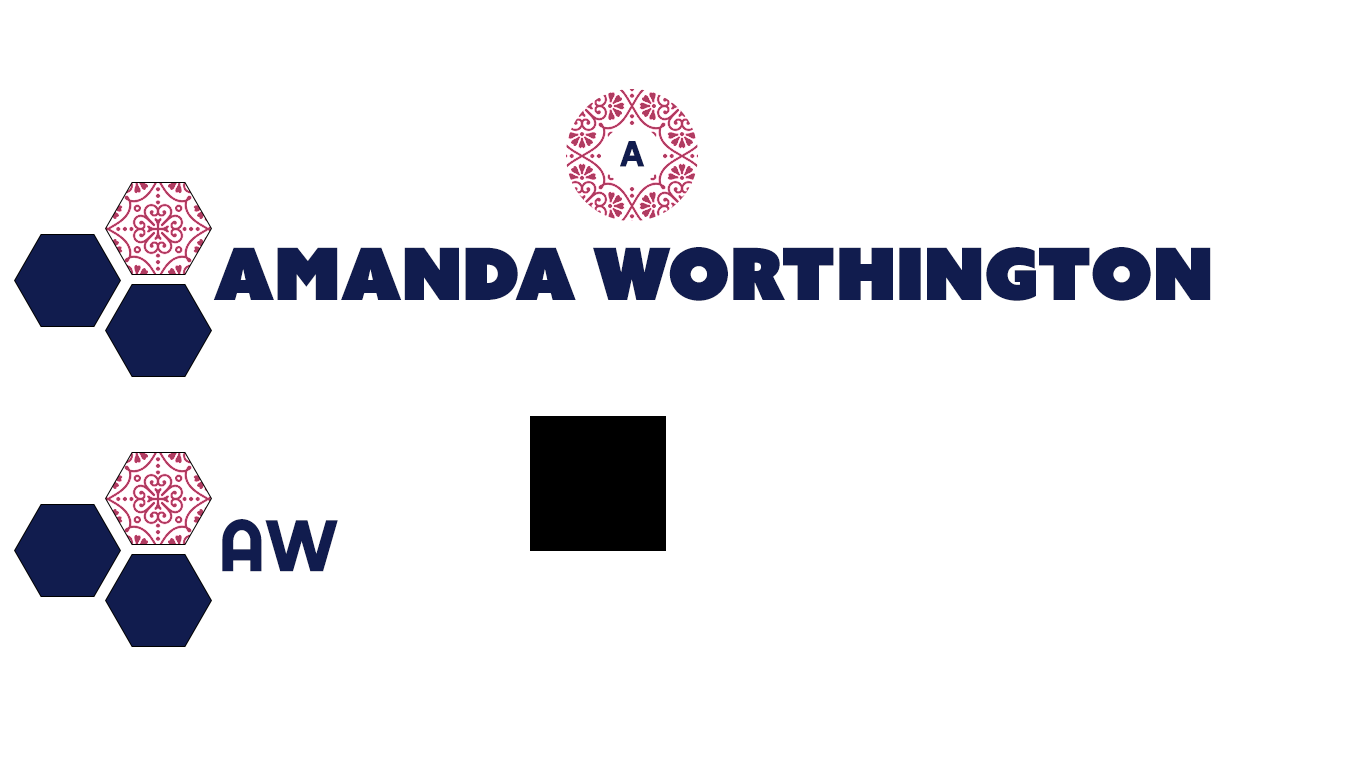
<style>
.page{position:relative;width:1366px;height:768px;background:#ffffff}
.page>*{position:absolute;margin:0}
.t1{font:36px "Arya-Single";color:#111c4e}
.t2{font:72px "AzoSansUber-Regular";color:#111c4e}
.t3{font:72px "Arya-Single";color:#111c4e}
</style>
<div class="page">
<p class="t1" style="left:620px;top:141px;width:25px;height:26px">A</p>
<p class="t2" style="left:213px;top:247px;width:998px;height:54px">Amanda WorthinGton</p>
<p class="t3" style="left:222px;top:519px;width:116px;height:53px">aW</p>
</div>
